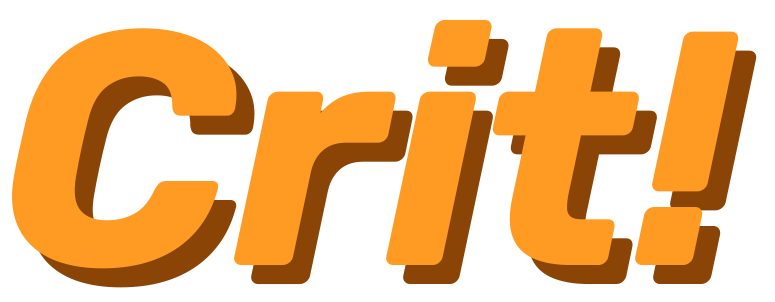
<style>
.page{position:relative;width:775px;height:302px;background:#ffffff}
.page>*{position:absolute;margin:0}
.t1{font:333.3px "Rubik-BoldItalic";color:#ff9a22}
.t2{font:333.3px "Rubik-BoldItalic"}
</style>
<div class="page">
<p class="t1" style="left:12px;top:19px;width:727px;height:250px">Crit!</p>
<p class="t2" style="left:30px;top:38px;width:727px;height:250px">Crit!</p>
</div>
